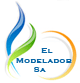
<style>
.page{position:relative;width:80px;height:83px;background:#ffffff}
.page>*{position:absolute;margin:0}
.t1{font:8px "CopperplateGothic-Bold";letter-spacing:0.065em;color:#0a67a6}
</style>
<div class="page">
<p class="t1" style="left:16px;top:48px;width:56px;height:24px">El <br>Modelador<br>       Sa</p>
</div>
